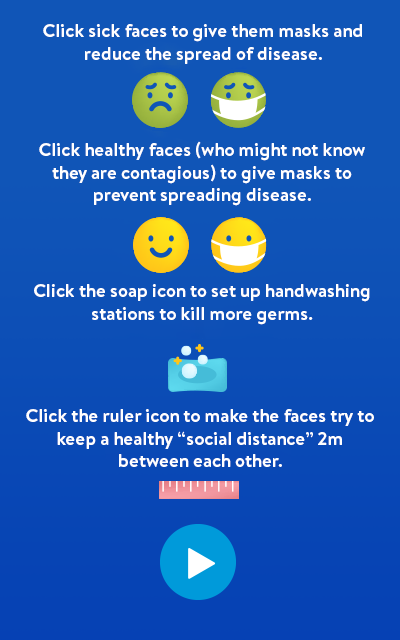
<style>
.page{position:relative;width:400px;height:640px;background:#1055b7}
.page>*{position:absolute;margin:0}
.t1{font:18.8px "Bogle-Bold";color:#ffffff}
</style>
<div class="page">
<p class="t1" style="left:43px;top:24px;width:319px;height:40px;text-align:center">Click sick faces to give them masks and reduce the spread of disease.</p>
<p class="t1" style="left:39px;top:141px;width:326px;height:65px;text-align:center">Click healthy faces (who might not know they are contagious) to give masks to prevent spreading disease.</p>
<p class="t1" style="left:34px;top:284px;width:336px;height:41px;text-align:center">Click the soap icon to set up handwashing stations to kill more germs.</p>
<p class="t1" style="left:26px;top:409px;width:348px;height:58px;text-align:center">Click the ruler icon to make the faces try to keep a healthy “social distance” 2m between each other.</p>
</div>
